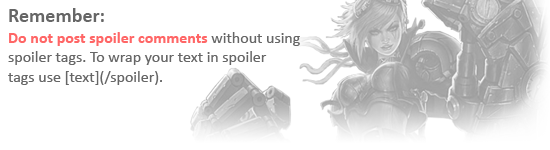
<style>
.page{position:relative;width:550px;height:150px;background:#ffffff}
.page>*{position:absolute;margin:0}
.t1{font:16px "Calibri"}
.t2{font:20px "Calibri-Bold"}
.t3{font:16px "Calibri-Bold"}
</style>
<div class="page">
<p class="t1" style="left:8px;top:8px;width:292px;height:77px"><span class="t2">Remember:<br><br></span><span class="t3">Do not post spoiler comments</span> without using <br>spoiler tags. To wrap your text in spoiler <br>tags use [text](/spoiler).</p>
</div>
